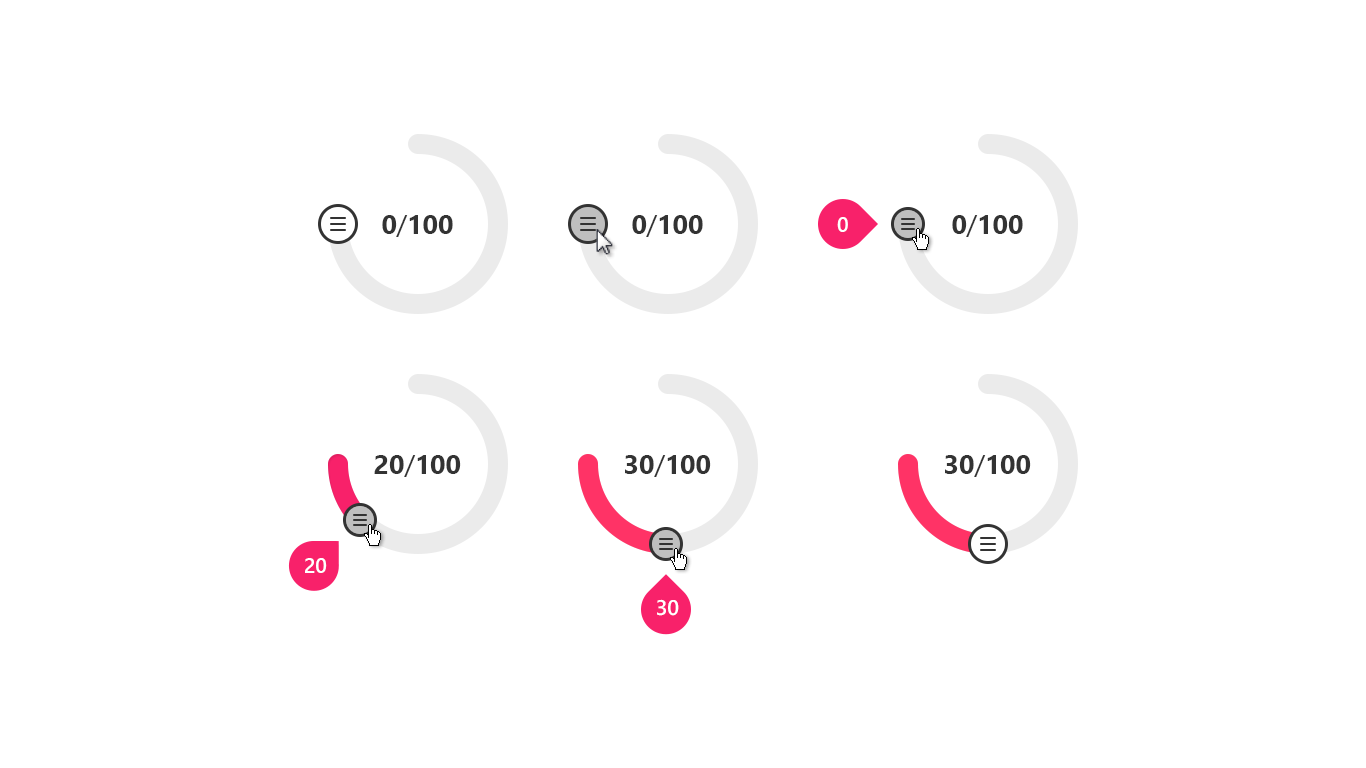
<style>
.page{position:relative;width:1366px;height:768px;background:#ffffff}
.page>*{position:absolute;margin:0}
.t1{font:26.7px "SegoeUI-Bold";color:#333333}
.t2{font:26.7px "SegoeUI";color:#333333}
.t3{font:21.3px "SegoeUI-Semibold";letter-spacing:-0.025em;color:#ffffff}
</style>
<div class="page">
<p class="t1" style="left:382px;top:215px;width:71px;height:22px">0<span class="t2">/</span>100</p>
<p class="t1" style="left:632px;top:215px;width:71px;height:22px">0<span class="t2">/</span>100</p>
<p class="t3" style="left:837px;top:217px;width:11px;height:15px">0</p>
<p class="t1" style="left:952px;top:215px;width:71px;height:22px">0<span class="t2">/</span>100</p>
<p class="t1" style="left:374px;top:455px;width:87px;height:22px">20<span class="t2">/</span>100</p>
<p class="t1" style="left:625px;top:455px;width:86px;height:22px">30<span class="t2">/</span>100</p>
<p class="t1" style="left:945px;top:455px;width:86px;height:22px">30<span class="t2">/</span>100</p>
<p class="t3" style="left:305px;top:558px;width:22px;height:15px">20</p>
<p class="t3" style="left:657px;top:599px;width:22px;height:17px">30</p>
</div>
